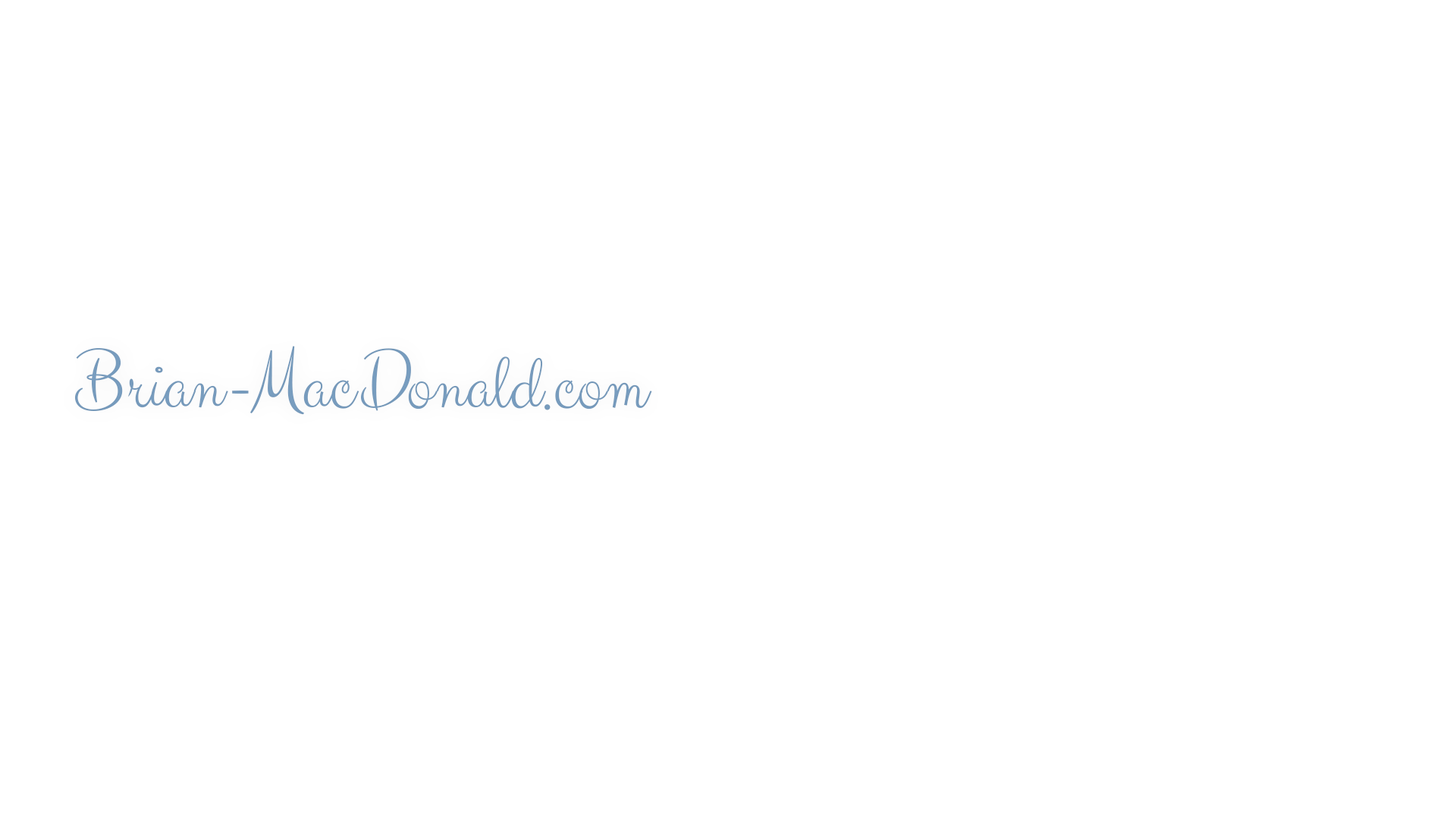
<style>
.page{position:relative;width:1456px;height:819px;background:#ffffff}
.page>*{position:absolute;margin:0}
.t1{font:77.8px "ClickerScript-Regular";color:#769bbc}
.t2{font:77.8px "ClickerScript-Regular";letter-spacing:-0.09em;color:#769bbc}
</style>
<div class="page">
<p class="t1" style="left:75px;top:346px;width:577px;height:69px">Brian-Mac <span class="t2">D</span>onald.com</p>
</div>
